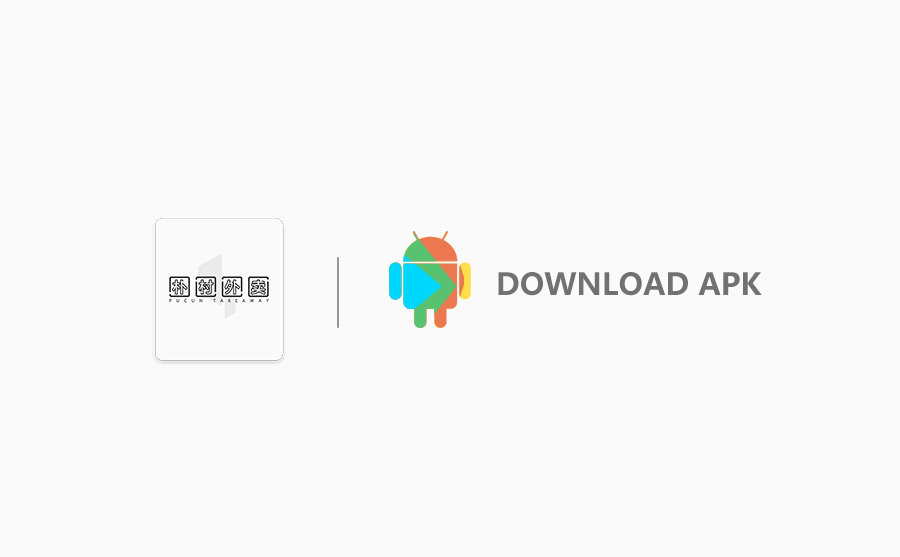
<style>
.page{position:relative;width:900px;height:557px;background:#fafafa}
.page>*{position:absolute;margin:0}
.t1{font:30px "MicrosoftYaHei-Bold";color:#717171}
</style>
<div class="page">
<p class="t1" style="left:498px;top:272px;width:264px;height:24px">DOWNLOAD APK</p>
</div>
